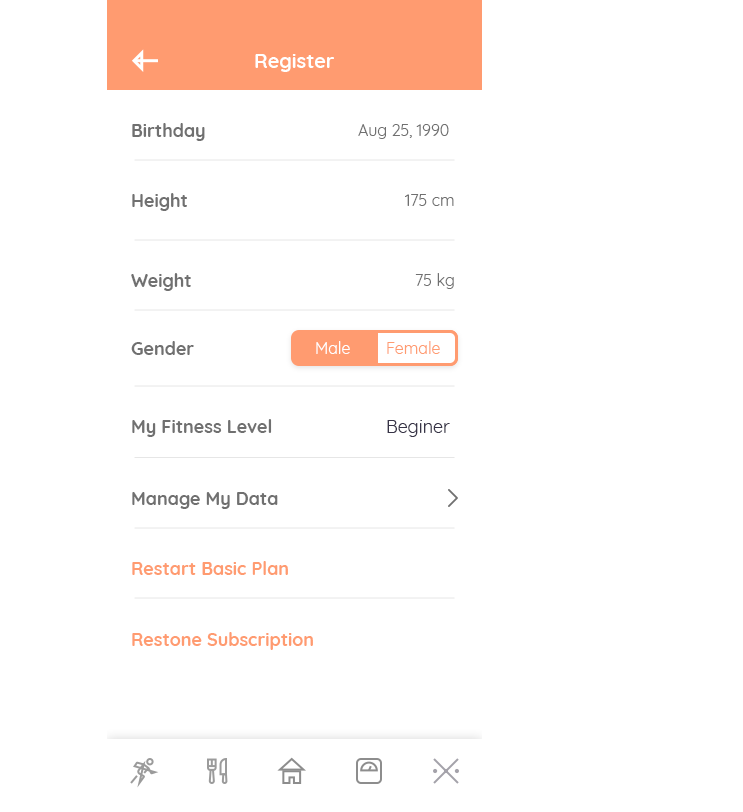
<style>
.page{position:relative;width:743px;height:812px;background:#ffffff}
.page>*{position:absolute;margin:0}
.t1{font:20px "Quicksand-Bold";color:#ffffff}
.t2{font:18px "Quicksand-Bold";color:#707070}
.t3{font:16px "Quicksand-Regular";color:#707070}
.t4{font:16px "Quicksand-Regular";color:#ffffff}
.t5{font:16px "Quicksand-Regular";color:#ff9b70}
.t6{font:18px "Quicksand-Regular";color:#373447}
.t7{font:18px "Quicksand-Bold";color:#ff9b70}
</style>
<div class="page">
<p class="t1" style="left:255px;top:54px;width:79px;height:18px">Register</p>
<p class="t2" style="left:132px;top:123px;width:73px;height:18px">Birthday</p>
<p class="t3" style="left:358px;top:124px;width:91px;height:15px">Aug 25, 1990</p>
<p class="t2" style="left:132px;top:193px;width:55px;height:18px">Height</p>
<p class="t3" style="left:405px;top:194px;width:49px;height:12px">175 cm</p>
<p class="t2" style="left:131px;top:273px;width:60px;height:18px">Weight</p>
<p class="t3" style="left:415px;top:273px;width:39px;height:16px">75 kg</p>
<p class="t2" style="left:131px;top:341px;width:63px;height:14px">Gender</p>
<p class="t4" style="left:316px;top:341px;width:34px;height:13px">Male</p>
<p class="t5" style="left:387px;top:341px;width:53px;height:13px">Female</p>
<p class="t2" style="left:132px;top:419px;width:140px;height:18px">My Fitness Level</p>
<p class="t6" style="left:387px;top:420px;width:63px;height:17px">Beginer</p>
<p class="t2" style="left:132px;top:492px;width:146px;height:17px">Manage My Data</p>
<p class="t7" style="left:132px;top:561px;width:156px;height:14px">Restart Basic Plan</p>
<p class="t7" style="left:132px;top:632px;width:181px;height:18px">Restone Subscription</p>
</div>
